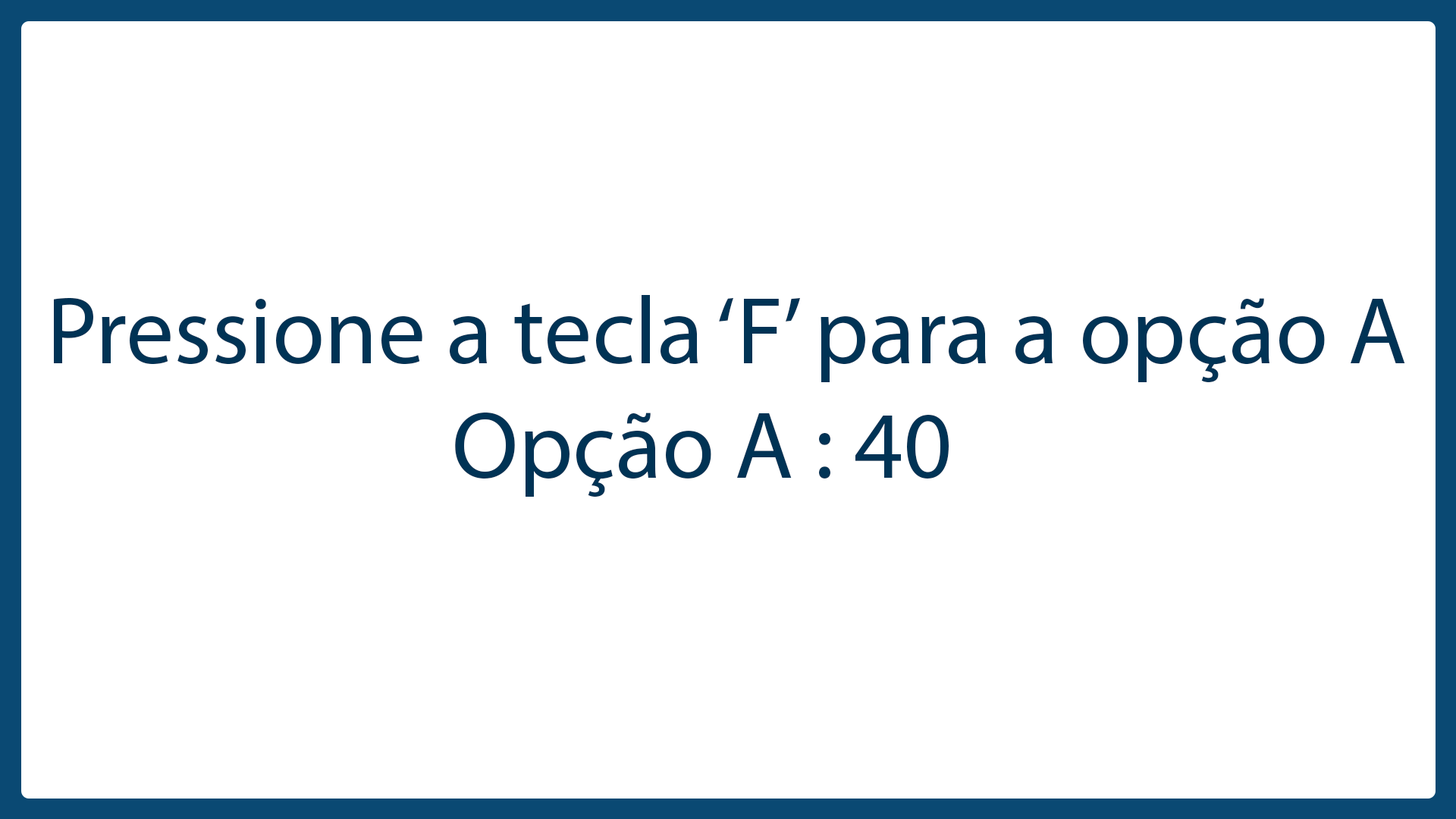
<style>
.page{position:relative;width:1456px;height:819px;background:#ffffff}
.page>*{position:absolute;margin:0}
.t1{font:95.9px "MyriadPro-Regular";color:#003355}
</style>
<div class="page">
<p class="t1" style="left:54px;top:295px;width:1351px;height:202px">Pressione a tecla ‘F’ para a opção A<br>                    Opção A : 40</p>
</div>
